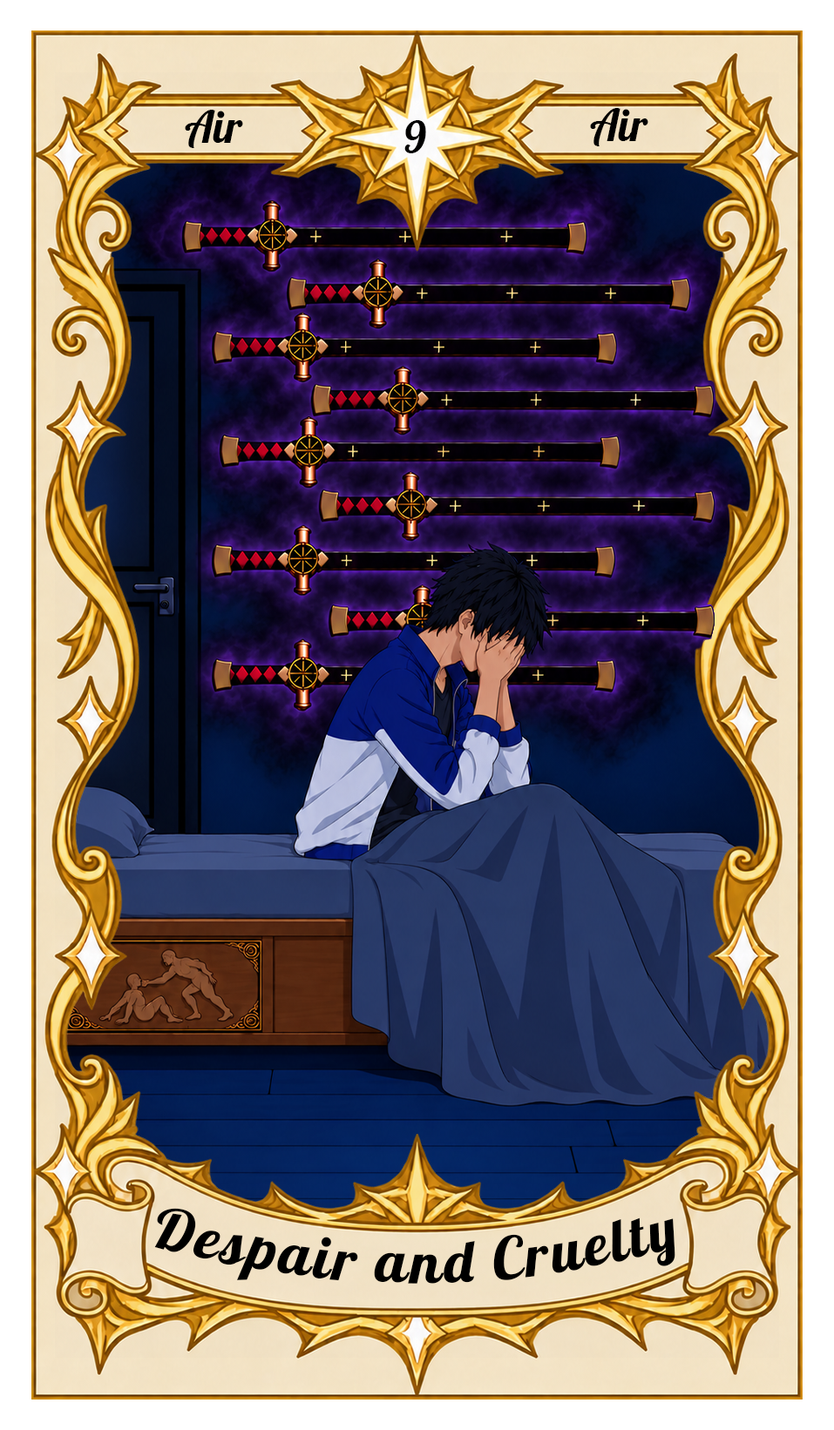
<style>
.page{position:relative;width:834px;height:1430px}
.page>*{position:absolute;margin:0}
.t1{font:43.6px "Lobster-Regular";color:#000000}
.t2{font:58.1px "Lobster-Regular";letter-spacing:0.05em;color:#000000}
</style>
<div class="page">
<p class="t1" style="left:185px;top:110px;width:58px;height:38px">Air</p>
<p class="t1" style="left:590px;top:108px;width:58px;height:38px">Air</p>
<p class="t1" style="left:404px;top:120px;width:22px;height:33px">9</p>
<p class="t2" style="left:154px;top:1208px;width:521px;height:76px">Despair and Cruelty</p>
</div>
